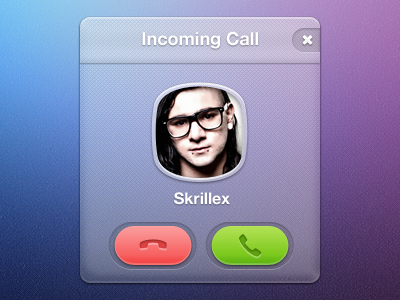
<style>
.page{position:relative;width:400px;height:300px}
.page>*{position:absolute;margin:0}
.t1{font:18px "HelveticaNeue-Bold";color:#ffffff}
.t2{font:16px "HelveticaNeue-Bold";color:#ffffff}
</style>
<div class="page">
<p class="t1" style="left:142px;top:31px;width:116px;height:18px">Incoming Call</p>
<p class="t2" style="left:174px;top:192px;width:56px;height:13px">Skrillex</p>
</div>
